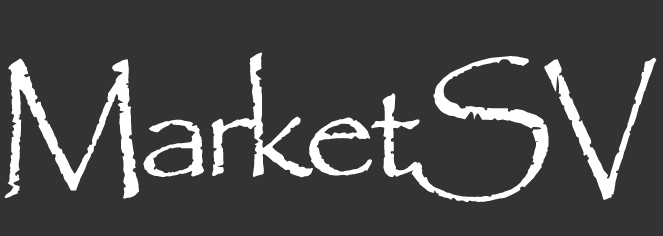
<style>
.page{position:relative;width:663px;height:236px;background:#333333}
.page>*{position:absolute;margin:0}
.t1{font:150px "Papyrus-Regular";letter-spacing:-0.075em;color:#ffffff}
</style>
<div class="page">
<p class="t1" style="left:4px;top:52px;width:653px;height:150px">MarketSV</p>
</div>
